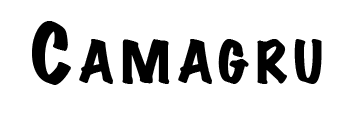
<style>
.page{position:relative;width:354px;height:118px;background:#ffffff}
.page>*{position:absolute;margin:0}
.t1{font:75px "MarkerFelt-Wide";letter-spacing:0.1em;color:#000000;font-variant:small-caps}
</style>
<div class="page">
<p class="t1" style="left:32px;top:21px;width:290px;height:64px">Camagru</p>
</div>
